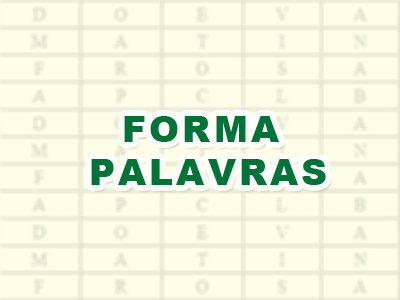
<style>
.page{position:relative;width:400px;height:300px;background:#fefde8}
.page>*{position:absolute;margin:0}
.t1{font:36px "Arial-Black";letter-spacing:0.09em;color:#017338}
</style>
<div class="page">
<p class="t1" style="left:91px;top:116px;width:235px;height:69px;text-align:center">FORMA <br>PALAVRAS</p>
</div>
